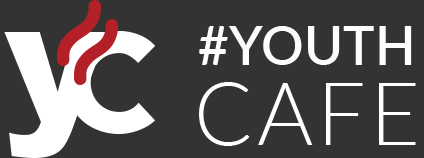
<style>
.page{position:relative;width:424px;height:158px;background:#333333}
.page>*{position:absolute;margin:0}
.t1{font:53.3px "Lato-Semibold";color:#fdfdfd}
.t2{font:172.9px "Arial-Black";letter-spacing:0.05em;color:#ffffff}
.t3{font:204.5px "Avenir-Heavy";letter-spacing:0.05em;color:#ffffff}
.t4{font:85.8px "Lato-Light";letter-spacing:0.05em;color:#ffffff}
</style>
<div class="page">
<p class="t1" style="left:199px;top:26px;width:213px;height:39px">#YOUTH</p>
<p class="t2" style="left:4px;top:32px;width:104px;height:126px">y</p>
<p class="t3" style="left:66px;top:31px;width:90px;height:103px">c</p>
<p class="t4" style="left:199px;top:82px;width:217px;height:64px">CAFE</p>
</div>
